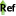
<style>
.page{position:relative;width:16px;height:16px;background:#ffffff}
.page>*{position:absolute;margin:0}
.t1{font:10px "Lato-Bold";color:#000000}
</style>
<div class="page">
<p class="t1" style="left:0px;top:4px;width:16px;height:8px">Ref</p>
</div>
